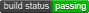
<style>
.page{position:relative;width:89px;height:13px}
.page>*{position:absolute;margin:0}
.t1{font:10px "ArialMT";color:#cccccc;scale:0.9 1}
.t2{font:10px "ArialMT";color:#ffffff;scale:0.9 1}
</style>
<div class="page">
<p class="t1" style="left:4px;top:2px;width:46px;height:7px">build status</p>
<p class="t2" style="left:55px;top:2px;width:31px;height:9px">passing</p>
</div>
